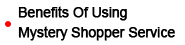
<style>
.page{position:relative;width:185px;height:45px;background:#ffffff}
.page>*{position:absolute;margin:0}
.t1{font:14px "ArialMT";letter-spacing:-0.025em;color:#000000;font-weight:bold}
</style>
<div class="page">
<p class="t1" style="left:18px;top:6px;width:109px;height:15px">Benefits Of Using</p>
<p class="t1" style="left:18px;top:26px;width:157px;height:15px">Mystery Shopper Service</p>
</div>
